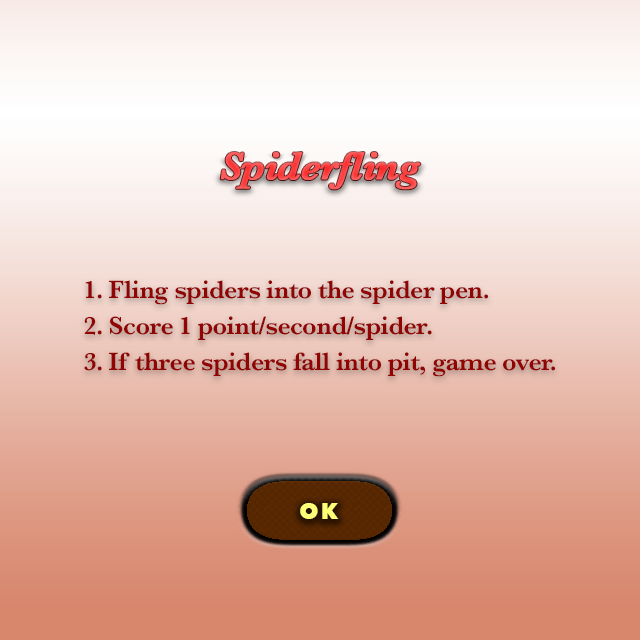
<style>
.page{position:relative;width:640px;height:640px}
.page>*{position:absolute;margin:0}
.t1{font:40px "Baskerville-SemiBoldItalic";letter-spacing:-0.02em;color:#fb4a4a;font-weight:bold}
.t2{font:26px "Baskerville-SemiBold";letter-spacing:-0.02em;color:#900404}
.t3{font:22px "AvenirNext-Heavy";letter-spacing:0.12em;color:#fdff77}
</style>
<div class="page">
<p class="t1" style="left:220px;top:152px;width:201px;height:38px">Spiderfling</p>
<p class="t2" style="left:85px;top:280px;width:404px;height:25px">1. Fling spiders into the spider pen.</p>
<p class="t2" style="left:84px;top:316px;width:348px;height:24px">2. Score 1 point/second/spider.</p>
<p class="t2" style="left:84px;top:352px;width:472px;height:25px">3. If three spiders fall into pit, game over.</p>
<p class="t3" style="left:300px;top:503px;width:39px;height:16px">OK</p>
</div>
